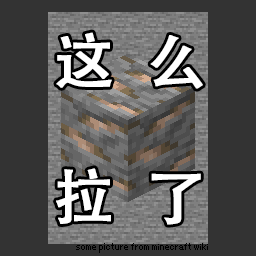
<style>
.page{position:relative;width:256px;height:256px;background:#333333}
.page>*{position:absolute;margin:0}
.t1{font:60px/60px "AdobeHeitiStd-Regular";color:#ffffff;font-weight:bold}
</style>
<div class="page">
<p class="t1" style="left:56px;top:32px;width:147px;height:193px">这  么<br><br><br>拉  了</p>
</div>
